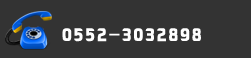
<style>
.page{position:relative;width:251px;height:58px;background:#333333}
.page>*{position:absolute;margin:0}
.t1{font:19px "Tensentype-RuiHeiJ-W6";letter-spacing:0.1em;color:#ffffff;scale:0.91 1}
</style>
<div class="page">
<p class="t1" style="left:62px;top:28px;width:139px;height:14px">0552-3032898</p>
</div>
